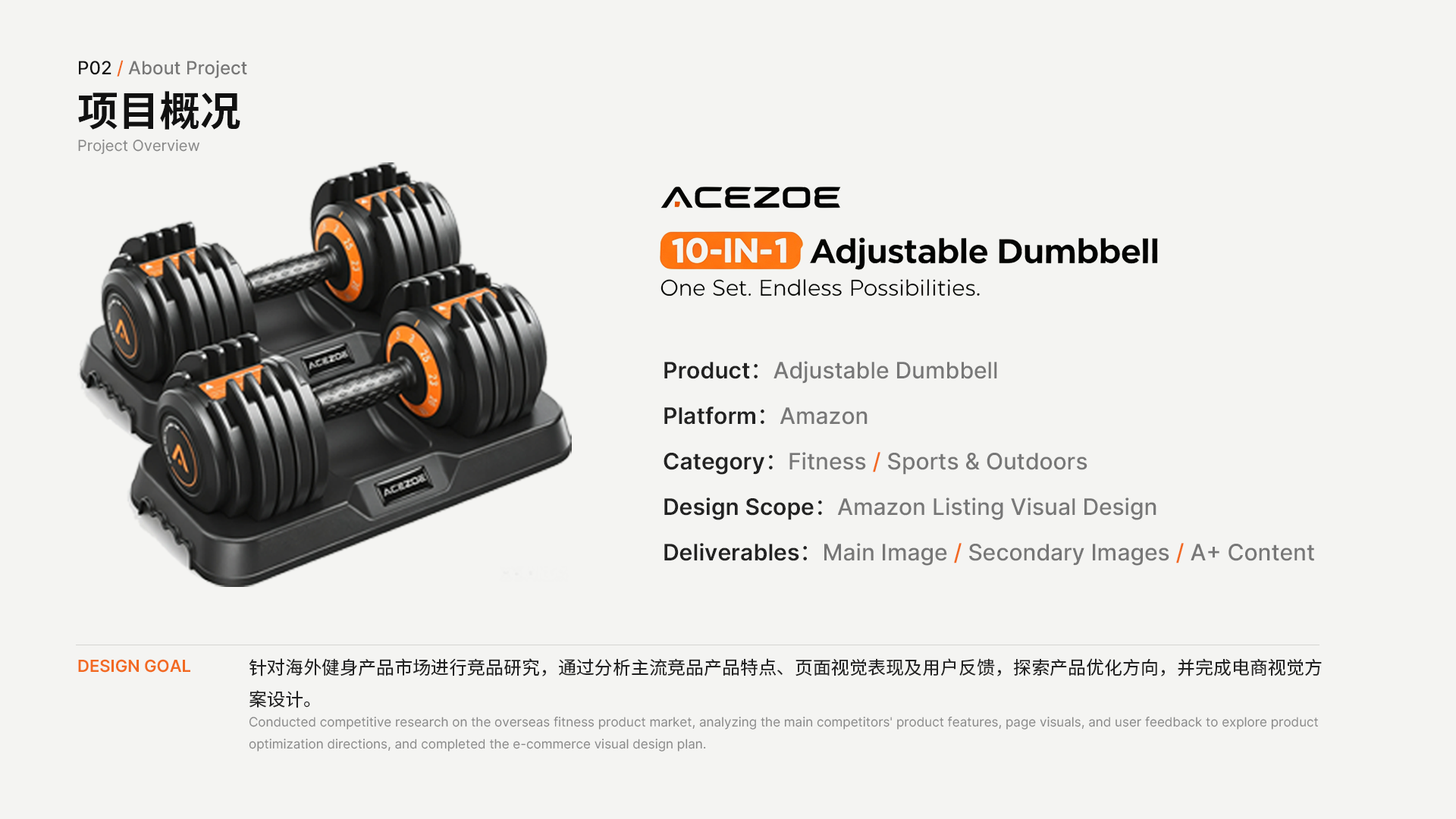
<style>
.page{position:relative;width:1456px;height:819px;background:#f4f4f2}
.page>*{position:absolute;margin:0}
.t1{font:18.2px "Inter-Medium";color:#777777}
.t2{font:18.2px "Inter-Medium";color:#111111}
.t3{font:18.2px "Inter-Medium";color:#f26a21}
.t4{font:40.9px "SourceHanSansSC-Bold";color:#111111}
.t5{font:15.2px "Inter-Regular";color:#888888}
.t6{font:22.7px/45.5px "Inter-Medium";color:#777777}
.t7{font:22.7px/45.5px "Inter-SemiBold";color:#222222}
.t8{font:22.7px/45.5px "AdobeHeitiStd-Regular";color:#222222}
.t9{font:22.7px/45.5px "Inter-Medium";color:#f26a21}
.t10{font:16.7px "Inter-SemiBold";color:#f26a21}
.t11{font:18.2px "SourceHanSansSC-Regular";color:#222222}
.t12{font:12.9px "Inter-Regular";color:#888888}
</style>
<div class="page">
<p class="t1" style="left:79px;top:60px;width:168px;height:18px"><span class="t2">P02 </span><span class="t3">/ </span>About Project</p>
<p class="t4" style="left:78px;top:91px;width:162px;height:39px">项目概况</p>
<p class="t5" style="left:78px;top:139px;width:121px;height:16px">Project Overview</p>
<p class="t6" style="left:664px;top:361px;width:650px;height:205px"><span class="t7">Product</span><span class="t8">：</span>Adjustable Dumbbell<br><span class="t7">Platform</span><span class="t8">：</span>Amazon<br><span class="t7">Category</span><span class="t8">：</span>Fitness <span class="t9">/</span> Sports &amp; Outdoors<br><span class="t7">Design Scope</span><span class="t8">：</span>Amazon Listing Visual Design<br><span class="t7">Deliverables</span><span class="t8">：</span>Main Image <span class="t9">/</span> Secondary Images <span class="t9">/</span> A+ Content</p>
<p class="t10" style="left:78px;top:659px;width:112px;height:14px">DESIGN GOAL</p>
<p class="t11" style="left:249px;top:658px;width:1073px;height:50px">针对海外健身产品市场进行竞品研究，通过分析主流竞品产品特点、页面视觉表现及用户反馈，探索产品优化方向，并完成电商视觉方案设计。</p>
<p class="t12" style="left:249px;top:716px;width:1069px;height:35px">Conducted competitive research on the overseas fitness product market, analyzing the main competitors' product features, page visuals, and user feedback to explore product optimization directions, and completed the e-commerce visual design plan.</p>
</div>
